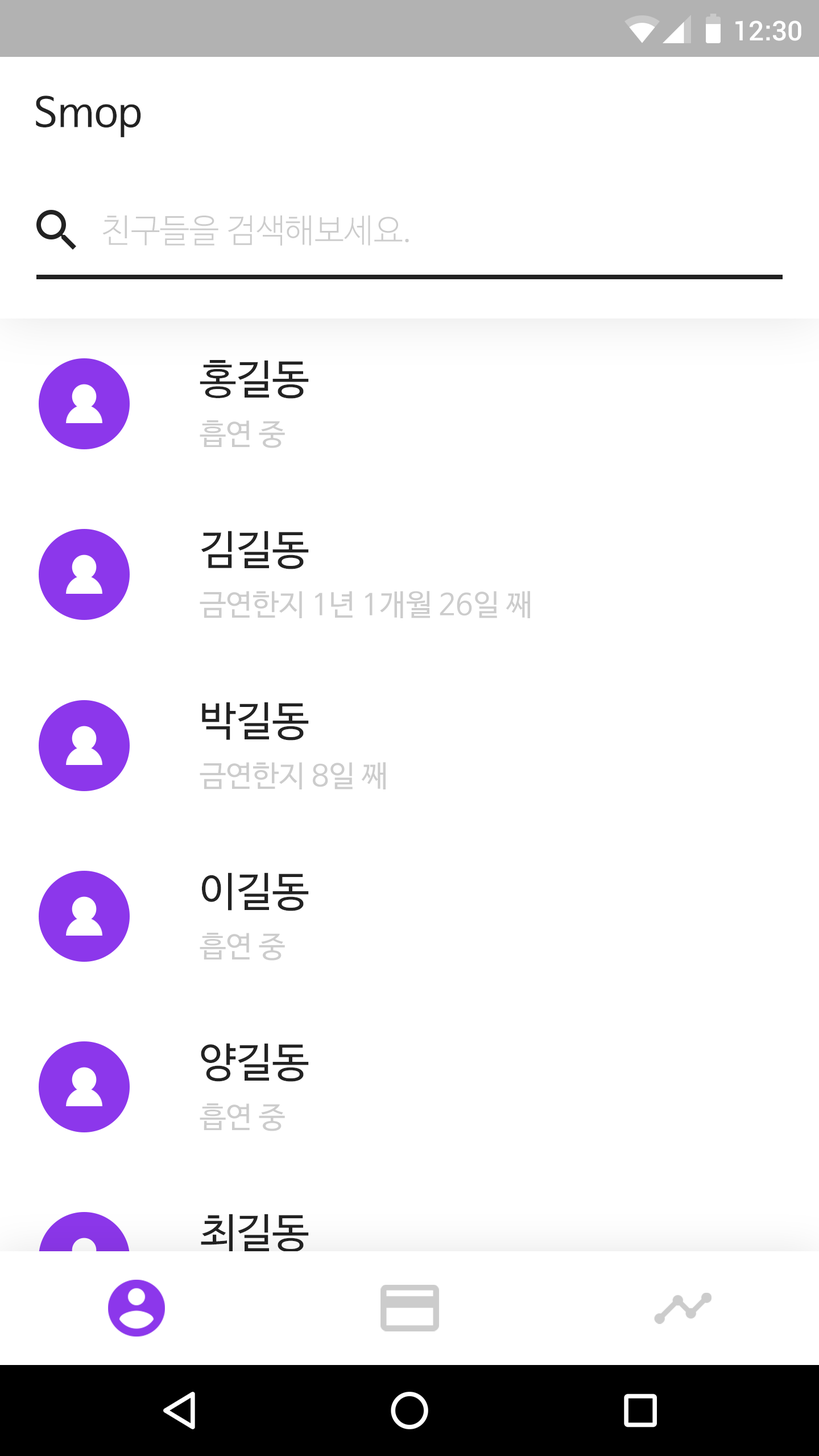
<style>
.page{position:relative;width:819px;height:1456px;background:#ffffff}
.page>*{position:absolute;margin:0}
.t1{font:27.3px "Roboto-Medium";color:#ffffff}
.t2{font:40.9px "NanumBarunGothic";color:#222222}
.t3{font:33px "NanumBarunGothicLight";color:#cccccc}
.t4{font:29.6px "NanumBarunGothic";color:#cccccc}
</style>
<div class="page">
<p class="t1" style="left:735px;top:20px;width:66px;height:21px">12:30</p>
<p class="t2" style="left:36px;top:96px;width:105px;height:42px">Smop</p>
<p class="t3" style="left:102px;top:215px;width:307px;height:31px">친구들을 검색해보세요.</p>
<p class="t2" style="left:200px;top:360px;width:109px;height:39px">홍길동</p>
<p class="t4" style="left:200px;top:420px;width:85px;height:28px">흡연 중</p>
<p class="t2" style="left:201px;top:531px;width:108px;height:38px">김길동</p>
<p class="t4" style="left:200px;top:591px;width:330px;height:27px">금연한지 1년 1개월 26일 째</p>
<p class="t2" style="left:202px;top:702px;width:107px;height:39px">박길동</p>
<p class="t4" style="left:200px;top:762px;width:186px;height:27px">금연한지 8일 째</p>
<p class="t2" style="left:202px;top:872px;width:107px;height:39px">이길동</p>
<p class="t4" style="left:200px;top:933px;width:85px;height:28px">흡연 중</p>
<p class="t2" style="left:201px;top:1043px;width:108px;height:39px">양길동</p>
<p class="t4" style="left:200px;top:1103px;width:85px;height:28px">흡연 중</p>
<p class="t2" style="left:201px;top:1214px;width:108px;height:38px">최길동</p>
</div>
